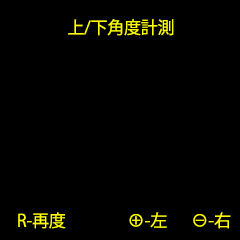
<style>
.page{position:relative;width:240px;height:240px;background:#000000}
.page>*{position:absolute;margin:0}
.t1{font:16.9px "KozGoPr6N-Regular";color:#ffff00}
</style>
<div class="page">
<p class="t1" style="left:68px;top:19px;width:106px;height:17px">上/下角度計測</p>
<p class="t1" style="left:18px;top:212px;width:48px;height:17px">R-再度</p>
<p class="t1" style="left:129px;top:212px;width:38px;height:16px">⊕-左</p>
<p class="t1" style="left:193px;top:212px;width:38px;height:17px">⊖-右</p>
</div>
